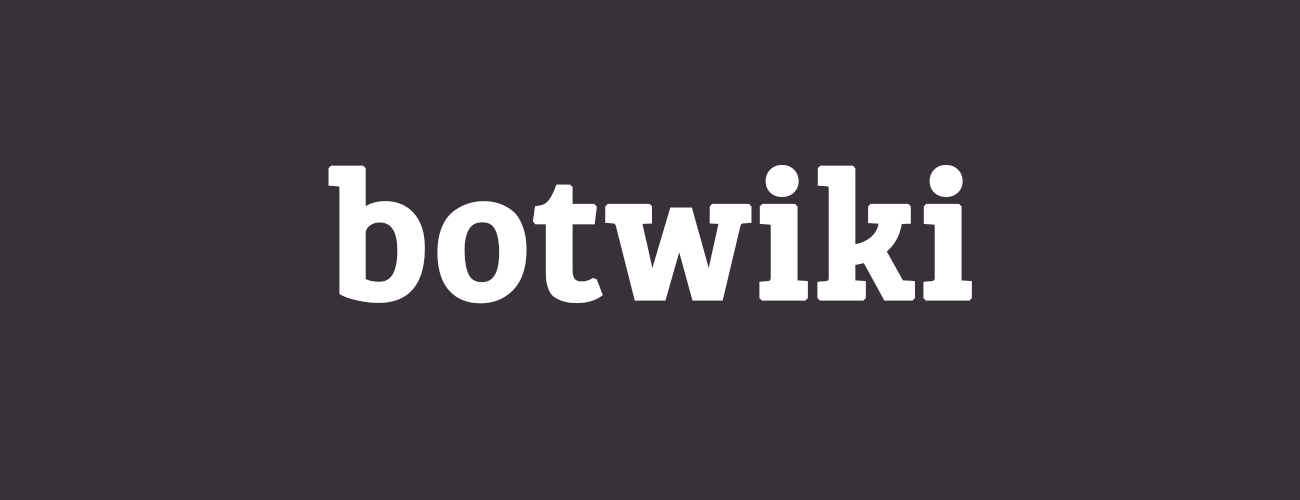
<style>
.page{position:relative;width:1300px;height:500px;background:#38313a}
.page>*{position:absolute;margin:0}
.t1{font:182px "BreeSerif-Regular";color:#ffffff;font-weight:bold}
</style>
<div class="page">
<p class="t1" style="left:328px;top:165px;width:644px;height:139px">botwiki</p>
</div>
